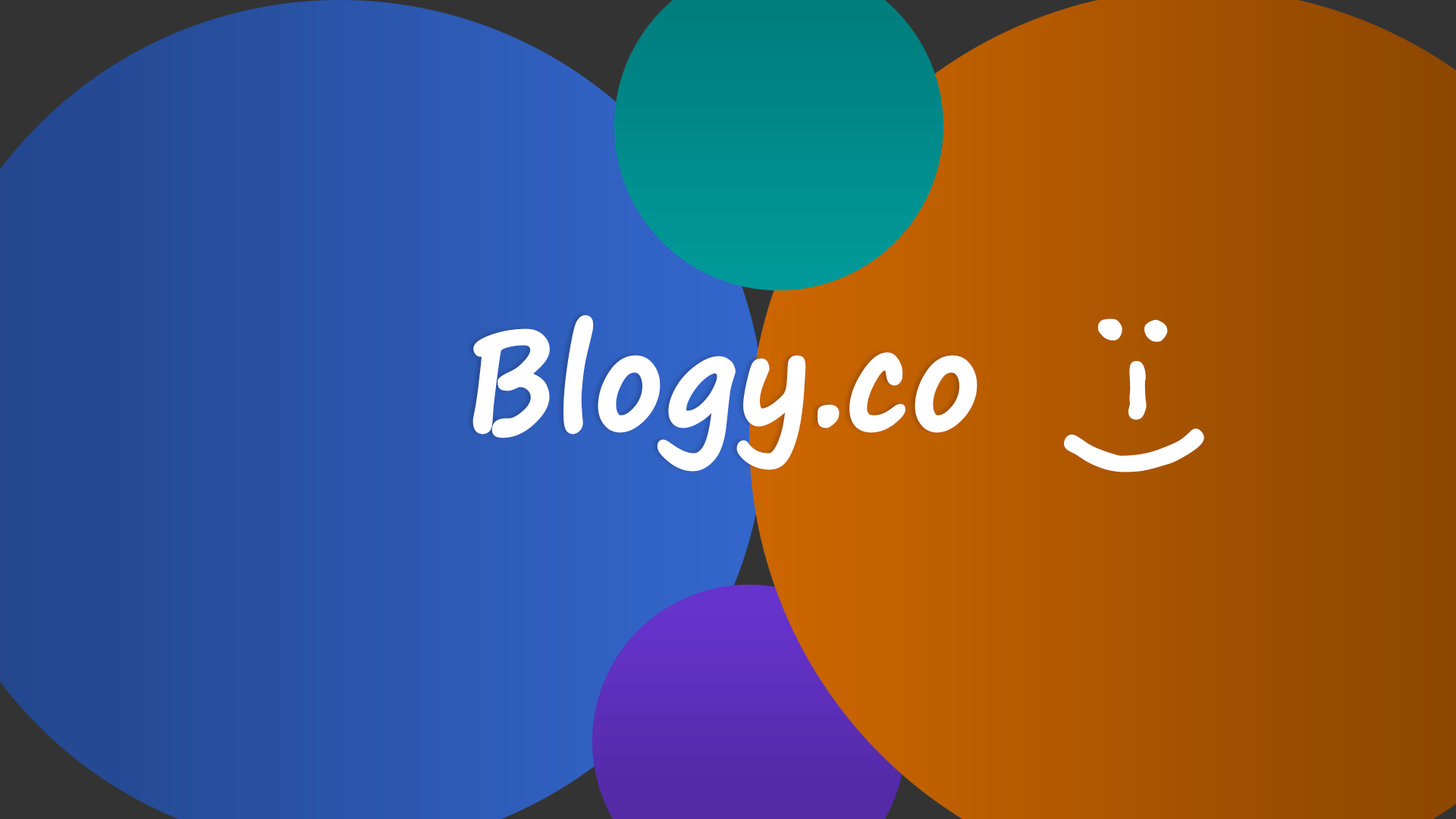
<style>
.page{position:relative;width:1456px;height:819px}
.page>*{position:absolute;margin:0}
.t1{font:133.5px "SegoePrint-Bold";color:#ffffff;font-weight:bold;scale:0.91 1}
</style>
<div class="page">
<p class="t1" style="left:472px;top:315px;width:505px;height:157px">Blogy.co</p>
<p class="t1" style="left:1064px;top:318px;width:140px;height:154px;rotate:90deg">:-)</p>
</div>
